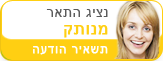
<style>
.page{position:relative;width:163px;height:61px;background:#ffffff}
.page>*{position:absolute;margin:0}
.t1{font:14px "ArialMT";letter-spacing:0.04em;color:#5b5b5b}
.t2{font:17px "ArialMT";letter-spacing:0.04em;color:#ffcf13;text-transform:uppercase;font-weight:bold}
.t3{font:12px "ArialMT";letter-spacing:0.06em;color:#ffffff;font-weight:bold}
</style>
<div class="page">
<p class="t1" style="left:46px;top:9px;width:62px;height:8px">ראתה גיצנ</p>
<p class="t2" style="left:64px;top:25px;width:44px;height:13px">קתונמ</p>
<p class="t3" style="left:33px;top:46px;width:75px;height:9px">העדוה ריאשת</p>
</div>
